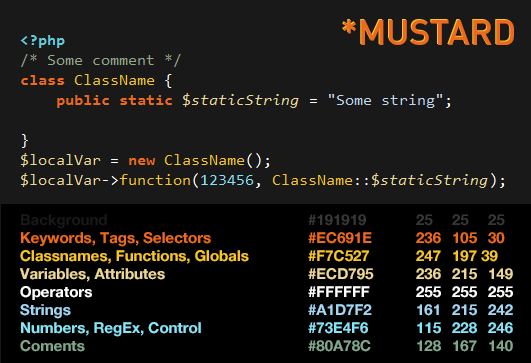
<style>
.page{position:relative;width:531px;height:363px;background:#191919}
.page>*{position:absolute;margin:0}
.t1{font:35px "DINPlMedium";color:#ec691e}
.t2{font:15px "HelveticaNeueLTPro-Bd";color:#f7c527}
.t3{font:15px "HelveticaNeueLTPro-Bd";color:#191919}
.t4{font:15px "HelveticaNeueLTPro-Bd";color:#373737}
.t5{font:15px "HelveticaNeueLTPro-Bd";color:#ec691e}
.t6{font:15px "HelveticaNeueLTPro-Bd";color:#ecd795}
.t7{font:15px "HelveticaNeueLTPro-Bd";color:#ffffff}
.t8{font:15px "HelveticaNeueLTPro-Bd";color:#a1d7f2}
.t9{font:15px "HelveticaNeueLTPro-Bd";color:#85e4f6}
.t10{font:15px "HelveticaNeueLTPro-Bd";color:#80a78c}
</style>
<div class="page">
<p class="t1" style="left:343px;top:20px;width:171px;height:25px">*MUSTARD</p>
<p class="t2" style="left:20px;top:214px;width:493px;height:138px"><span class="t3">Background      </span><span class="t4">#191919  25 25 25<br></span><span class="t5">Keywords, Tags, Selectors   #EC691E  236 105 30<br></span>Classnames, Functions, Globals  #F7C527  247 197 39<br><span class="t6">Variables, Attributes    #ECD795  236 215 149<br></span><span class="t7">Operators      #FFFFFF  255 255 255<br></span><span class="t8">Strings       #A1D7F2  161  215 242<br></span><span class="t9">Numbers, RegEx, Control   #73E4F6  115 228 246<br></span><span class="t10">Coments       #80A78C  128 167 140</span></p>
</div>
